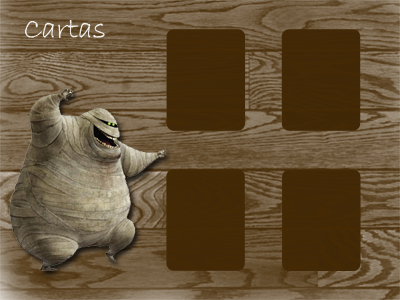
<style>
.page{position:relative;width:400px;height:300px}
.page>*{position:absolute;margin:0}
.t1{font:30px "BradleyHandITC";color:#f6f5f3}
</style>
<div class="page">
<p class="t1" style="left:25px;top:19px;width:80px;height:19px">Cartas</p>
</div>
